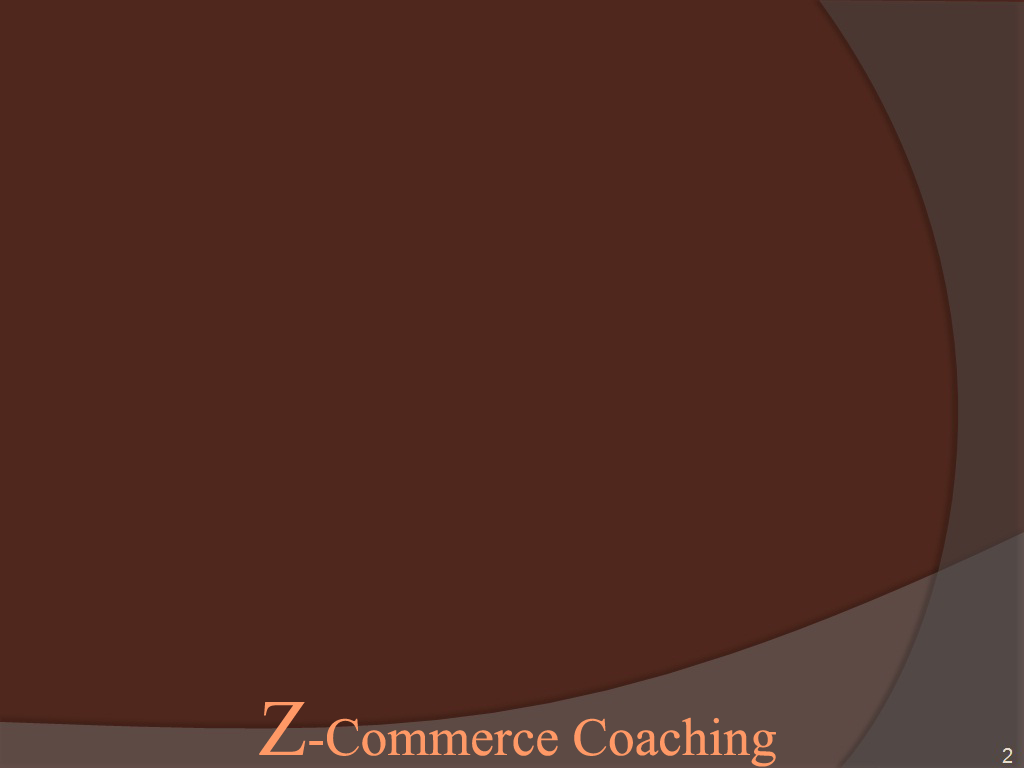
<style>
.page{position:relative;width:1024px;height:768px;background:#4f271d}
.page>*{position:absolute;margin:0}
.t1{font:53.3px "TimesNewRomanPSMT";color:#ff9966}
.t2{font:80px "TimesNewRomanPSMT";color:#ff9966}
</style>
<div class="page">
<p class="t1" style="left:259px;top:702px;width:517px;height:65px"><span class="t2">Z</span>-Commerce Coaching</p>
</div>
